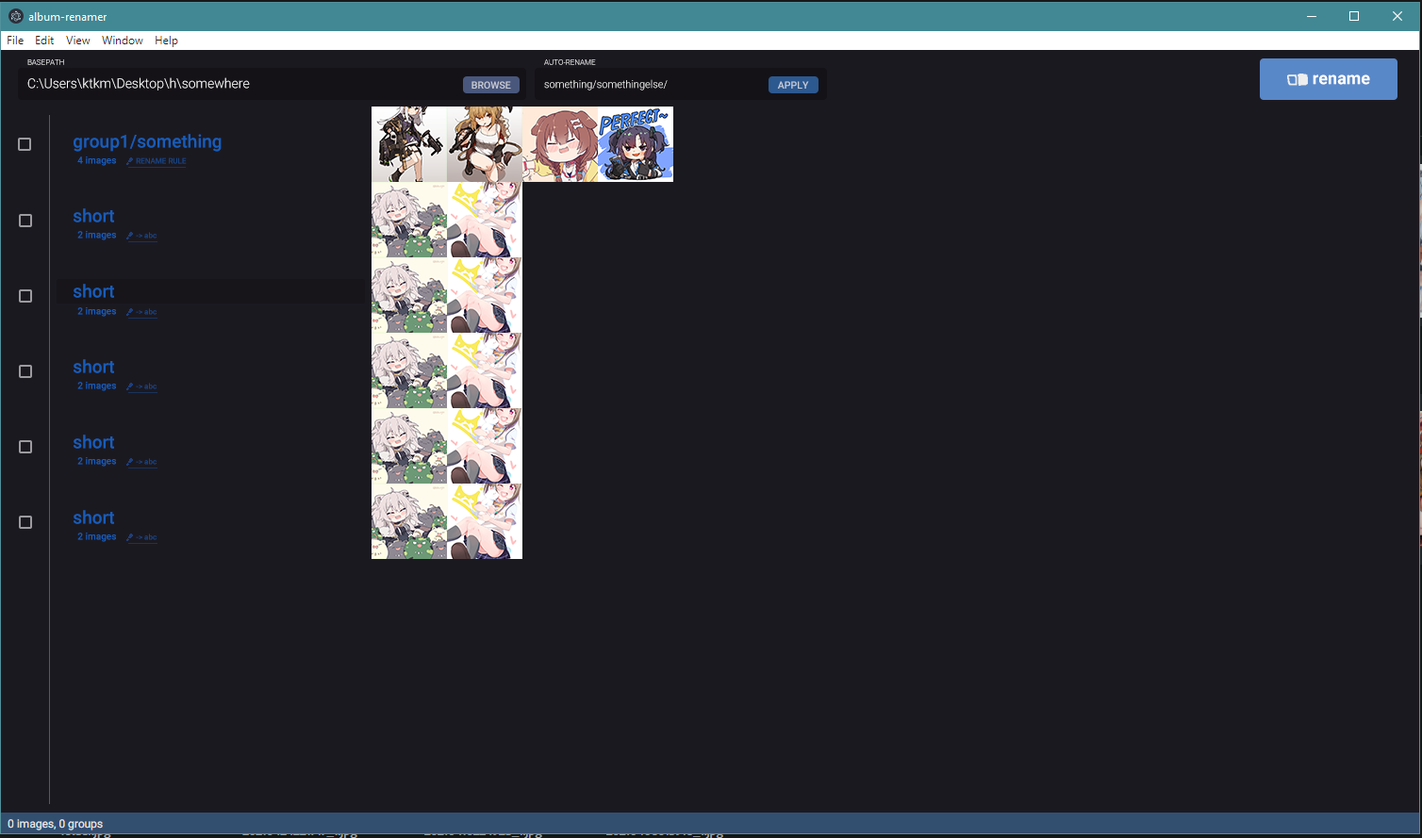
<style>
.page{position:relative;width:1422px;height:838px;background:#1b1920}
.page>*{position:absolute;margin:0}
.t1{font:7.5px "Roboto-Light"}
.t2{font:13.2px "Roboto-Light";color:#ffffff}
.t3{font:17px "Roboto-Bold";color:#ffffff}
.t4{font:9.9px "Roboto-Medium";color:#cacdd4}
.t5{font:10.4px "Roboto-Light";color:#ffffff}
.t6{font:9.9px "Roboto-Medium";color:#c6cdd9}
.t7{font:17.9px "Roboto-Medium";color:#175dbb}
.t8{font:9.4px "Roboto-Medium";color:#175dbb}
.t9{font:7.5px "Roboto-Medium";color:#184585}
</style>
<div class="page">
<p class="t1" style="left:27px;top:59px;width:37px;height:6px">BASEPATH</p>
<p class="t1" style="left:544px;top:59px;width:52px;height:6px">AUTO-RENAME</p>
<p class="t2" style="left:27px;top:77px;width:223px;height:14px">C:\Users\ktkm\Desktop\h\somewhere</p>
<p class="t3" style="left:1313px;top:75px;width:57px;height:10px">rename</p>
<p class="t4" style="left:472px;top:81px;width:39px;height:8px">BROWSE</p>
<p class="t5" style="left:544px;top:79px;width:124px;height:12px">something/somethingelse/</p>
<p class="t6" style="left:777px;top:81px;width:32px;height:8px">APPLY</p>
<p class="t7" style="left:74px;top:134px;width:148px;height:18px">group1/something</p>
<p class="t8" style="left:77px;top:157px;width:39px;height:9px">4 images</p>
<p class="t9" style="left:136px;top:158px;width:51px;height:6px">RENAME RULE</p>
<p class="t7" style="left:74px;top:208px;width:40px;height:15px">short</p>
<p class="t8" style="left:77px;top:231px;width:39px;height:9px">2 images</p>
<p class="t9" style="left:136px;top:232px;width:21px;height:7px">-&gt; abc</p>
<p class="t7" style="left:74px;top:284px;width:40px;height:14px">short</p>
<p class="t8" style="left:77px;top:307px;width:39px;height:10px">2 images</p>
<p class="t9" style="left:136px;top:308px;width:21px;height:7px">-&gt; abc</p>
<p class="t7" style="left:74px;top:359px;width:40px;height:14px">short</p>
<p class="t8" style="left:77px;top:382px;width:39px;height:9px">2 images</p>
<p class="t9" style="left:136px;top:383px;width:21px;height:7px">-&gt; abc</p>
<p class="t7" style="left:74px;top:435px;width:40px;height:14px">short</p>
<p class="t8" style="left:77px;top:457px;width:39px;height:10px">2 images</p>
<p class="t9" style="left:136px;top:458px;width:21px;height:7px">-&gt; abc</p>
<p class="t7" style="left:74px;top:510px;width:40px;height:14px">short</p>
<p class="t8" style="left:77px;top:533px;width:39px;height:9px">2 images</p>
<p class="t9" style="left:136px;top:534px;width:21px;height:6px">-&gt; abc</p>
</div>
